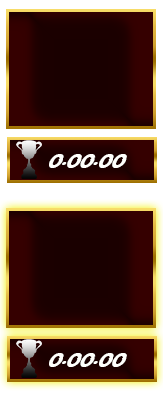
<style>
.page{position:relative;width:163px;height:408px}
.page>*{position:absolute;margin:0}
.t1{font:16px "SFFedora";letter-spacing:-0.005em;color:#fffffc;scale:1.2 1}
</style>
<div class="page">
<p class="t1" style="left:49px;top:154px;width:78px;height:14px">0.00.00</p>
<p class="t1" style="left:49px;top:353px;width:78px;height:14px">0.00.00</p>
</div>
